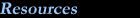
<style>
.page{position:relative;width:140px;height:18px;background:#000000}
.page>*{position:absolute;margin:0}
.t1{font:18px "Garamond-Bold";color:#99ccff;font-style:italic}
</style>
<div class="page">
<p class="t1" style="left:0px;top:2px;width:77px;height:13px">Resources</p>
</div>
